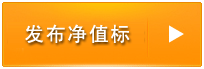
<style>
.page{position:relative;width:204px;height:69px}
.page>*{position:absolute;margin:0}
.t1{font:20px "SimHei";letter-spacing:0.08em;color:#ffffff}
</style>
<div class="page">
<p class="t1" style="left:25px;top:24px;width:105px;height:20px">发布净值标</p>
</div>
